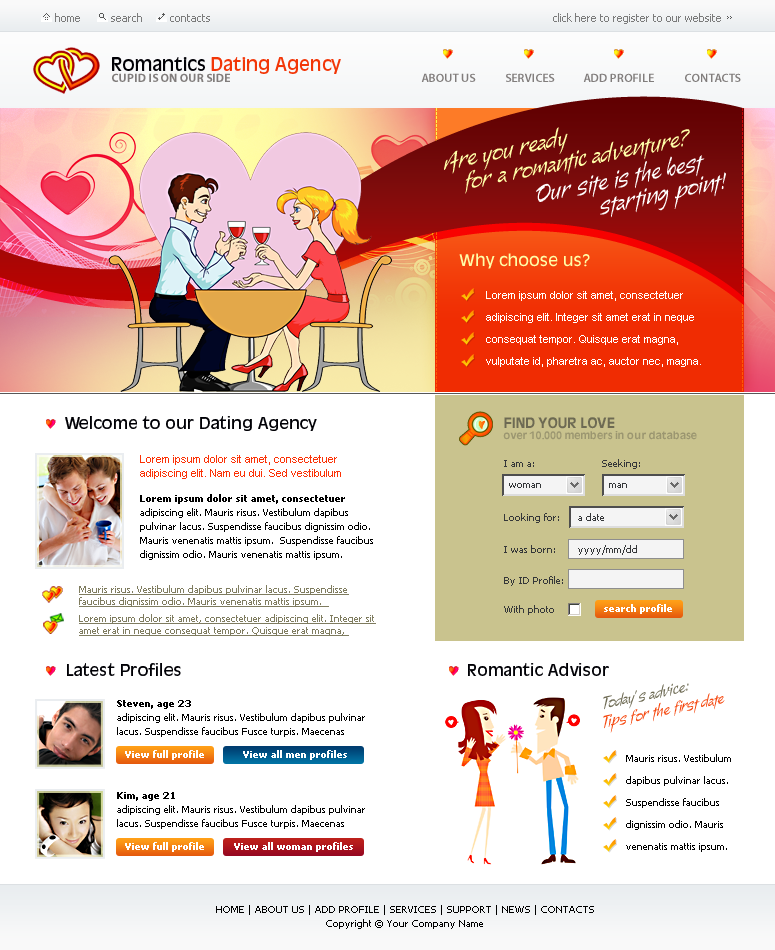
<style>
.page{position:relative;width:775px;height:950px;background:#ffffff}
.page>*{position:absolute;margin:0}
.t1{font:11px "Tahoma";color:#7b7b7b}
.t2{font:18px "AntiqueOliveStd-Roman";color:#f23607}
.t3{font:18px "AntiqueOliveStd-Roman";color:#000005}
.t4{font:12px "MyriadPro-Bold";color:#817d7c}
.t5{font:12px "MyriadPro-Semibold";color:#817d7c}
.t6{font:10px "Tahoma"}
.t7{font:24px "Alma-Alternates";color:#fffea8}
.t8{font:24px "Alma-Alternates";color:#ffffff}
.t9{font:16px "AntiqueOliveStd-Roman";color:#fffea8}
.t10{font:11px/22px "ArialMT";color:#ffffff}
.t11{font:16px "AntiqueOliveStd-Roman";color:#000005}
.t12{font:14px "AntiqueOliveStd-Bold";color:#6d6a53;text-transform:uppercase}
.t13{font:10px "AntiqueOliveStd-Bold";color:#9b9670}
.t14{font:11px/14px "ArialMT";color:#fb3206}
.t15{font:10px "Tahoma";color:#353739}
.t16{font:10px/14px "Tahoma";color:#000000}
.t17{font:10px/14px "Tahoma-Bold";color:#000000}
.t18{font:10px/12px "Tahoma";color:#7f7c5f;text-decoration:underline}
.t19{font:10px "Tahoma-Bold";color:#ffffff}
.t20{font:16px "Alma-Alternates";color:#6d6a53}
.t21{font:16px "Alma-Alternates";color:#f5480f}
.t22{font:10px/22px "Tahoma";color:#000000}
</style>
<div class="page">
<p class="t1" style="left:55px;top:13px;width:25px;height:9px">home</p>
<p class="t1" style="left:111px;top:13px;width:31px;height:9px">search</p>
<p class="t1" style="left:170px;top:14px;width:40px;height:8px">contacts</p>
<p class="t1" style="left:553px;top:13px;width:168px;height:11px">click here to register to our website</p>
<p class="t2" style="left:112px;top:57px;width:229px;height:17px"><span class="t3">Romantics </span>Dating Agency</p>
<p class="t4" style="left:112px;top:73px;width:118px;height:9px">CUPID IS ON OUR SIDE</p>
<p class="t5" style="left:421px;top:73px;width:55px;height:9px">ABOUT US</p>
<p class="t5" style="left:506px;top:73px;width:49px;height:9px">SERVICES</p>
<p class="t5" style="left:583px;top:73px;width:71px;height:9px">ADD PROFILE</p>
<p class="t5" style="left:685px;top:73px;width:56px;height:9px">CONTACTS</p>
<p class="t6" style="left:742px;top:108px;width:1px;height:299px;rotate:90deg">---------------------------------------------------------------------------</p>
<p class="t7" style="left:444px;top:127px;width:124px;height:47px;rotate:-12deg">Are you ready</p>
<p class="t7" style="left:465px;top:129px;width:225px;height:65px;rotate:-11deg">for a romantic adventure?</p>
<p class="t8" style="left:536px;top:155px;width:169px;height:47px;rotate:-11deg">Our site is the best</p>
<p class="t8" style="left:600px;top:172px;width:126px;height:46px;rotate:-11deg">starting point!</p>
<p class="t9" style="left:459px;top:253px;width:131px;height:16px">Why choose us?</p>
<p class="t10" style="left:486px;top:291px;width:215px;height:76px">Lorem ipsum dolor sit amet, consectetuer adipiscing elit. Integer sit amet erat in neque consequat tempor. Quisque erat magna, vulputate id, pharetra ac, auctor nec, magna.</p>
<p class="t11" style="left:65px;top:416px;width:252px;height:15px">Welcome to our Dating Agency</p>
<p class="t12" style="left:504px;top:417px;width:111px;height:12px">FIND YOUR LOVE</p>
<p class="t13" style="left:503px;top:431px;width:194px;height:9px">over 10.000 members in our database</p>
<p class="t14" style="left:140px;top:455px;width:201px;height:24px">Lorem ipsum dolor sit amet, consectetuer adipiscing elit. Nam eu dui. Sed vestibulum</p>
<p class="t15" style="left:504px;top:460px;width:30px;height:7px">I am a:</p>
<p class="t15" style="left:602px;top:459px;width:38px;height:10px">Seeking:</p>
<p class="t15" style="left:509px;top:483px;width:32px;height:5px">woman</p>
<p class="t15" style="left:609px;top:483px;width:18px;height:5px">man</p>
<p class="t16" style="left:140px;top:494px;width:233px;height:66px"><span class="t17">Lorem ipsum dolor sit amet, consectetuer</span> adipiscing elit. Mauris risus. Vestibulum dapibus pulvinar lacus. Suspendisse faucibus dignissim odio. Mauris venenatis mattis ipsum.  Suspendisse faucibus dignissim odio. Mauris venenatis mattis ipsum.</p>
<p class="t15" style="left:504px;top:513px;width:55px;height:10px">Looking for:</p>
<p class="t15" style="left:578px;top:513px;width:26px;height:8px">a date</p>
<p class="t15" style="left:504px;top:545px;width:51px;height:8px">I was born:</p>
<p class="t15" style="left:578px;top:545px;width:59px;height:10px">yyyy/mm/dd</p>
<p class="t15" style="left:504px;top:576px;width:59px;height:10px">By ID Profile:</p>
<p class="t18" style="left:79px;top:585px;width:270px;height:22px">Mauris risus. Vestibulum dapibus pulvinar lacus. Suspendisse faucibus dignissim odio. Mauris venenatis mattis ipsum.</p>
<p class="t15" style="left:504px;top:605px;width:50px;height:10px">With photo</p>
<p class="t19" style="left:604px;top:604px;width:68px;height:10px">search profile</p>
<p class="t18" style="left:79px;top:614px;width:297px;height:22px">Lorem ipsum dolor sit amet, consectetuer adipiscing elit. Integer sit amet erat in neque consequat tempor. Quisque erat magna,</p>
<p class="t11" style="left:67px;top:663px;width:114px;height:13px">Latest Profiles</p>
<p class="t11" style="left:468px;top:663px;width:141px;height:13px">Romantic Advisor</p>
<p class="t20" style="left:603px;top:683px;width:86px;height:27px;rotate:-11deg">Today’s advice:</p>
<p class="t16" style="left:117px;top:700px;width:248px;height:37px"><span class="t17">Steven, age 23 <br></span>adipiscing elit. Mauris risus. Vestibulum dapibus pulvinar lacus. Suspendisse faucibus Fusce turpis. Maecenas</p>
<p class="t21" style="left:603px;top:693px;width:122px;height:40px;rotate:-11deg">Tips for the first date</p>
<p class="t19" style="left:125px;top:750px;width:79px;height:10px">View full profile</p>
<p class="t19" style="left:243px;top:750px;width:104px;height:10px">View all men profiles</p>
<p class="t22" style="left:626px;top:754px;width:105px;height:98px">Mauris risus. Vestibulum dapibus pulvinar lacus. Suspendisse faucibus dignissim odio. Mauris venenatis mattis ipsum.</p>
<p class="t16" style="left:117px;top:792px;width:248px;height:37px"><span class="t17">Kim, age 21<br></span>adipiscing elit. Mauris risus. Vestibulum dapibus pulvinar lacus. Suspendisse faucibus Fusce turpis. Maecenas</p>
<p class="t19" style="left:125px;top:842px;width:79px;height:10px">View full profile</p>
<p class="t19" style="left:234px;top:842px;width:119px;height:10px">View all woman profiles</p>
<p class="t16" style="left:216px;top:905px;width:378px;height:24px;text-align:center">HOME | ABOUT US | ADD PROFILE | SERVICES | SUPPORT | NEWS | CONTACTS<br>Copyright © Your Company Name</p>
</div>
